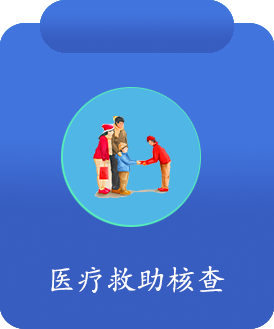
<style>
.page{position:relative;width:274px;height:329px;background:#375dc1}
.page>*{position:absolute;margin:0}
.t1{font:30px "KaiTi";color:#ffffff}
</style>
<div class="page">
<p class="t1" style="left:51px;top:266px;width:174px;height:27px">医疗救助核查</p>
</div>
